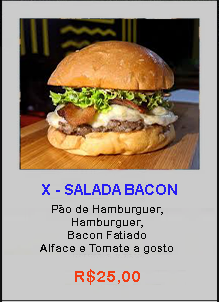
<style>
.page{position:relative;width:219px;height:302px;background:#cbcbcb}
.page>*{position:absolute;margin:0}
.t1{font:14.7px "Arial-BoldMT";color:#261cf4}
.t2{font:10.7px "ArialRoundedMTBold";color:#090909}
.t3{font:16px "ArialRoundedMTBold";color:#f33c12}
</style>
<div class="page">
<p class="t1" style="left:42px;top:184px;width:135px;height:11px">X - SALADA BACON</p>
<p class="t2" style="left:40px;top:205px;width:133px;height:49px;text-align:center">Pão de Hamburguer, Hamburguer, <br>Bacon Fatiado<br>Alface e Tomate a gosto</p>
<p class="t3" style="left:75px;top:269px;width:65px;height:16px">R$25,00</p>
</div>
